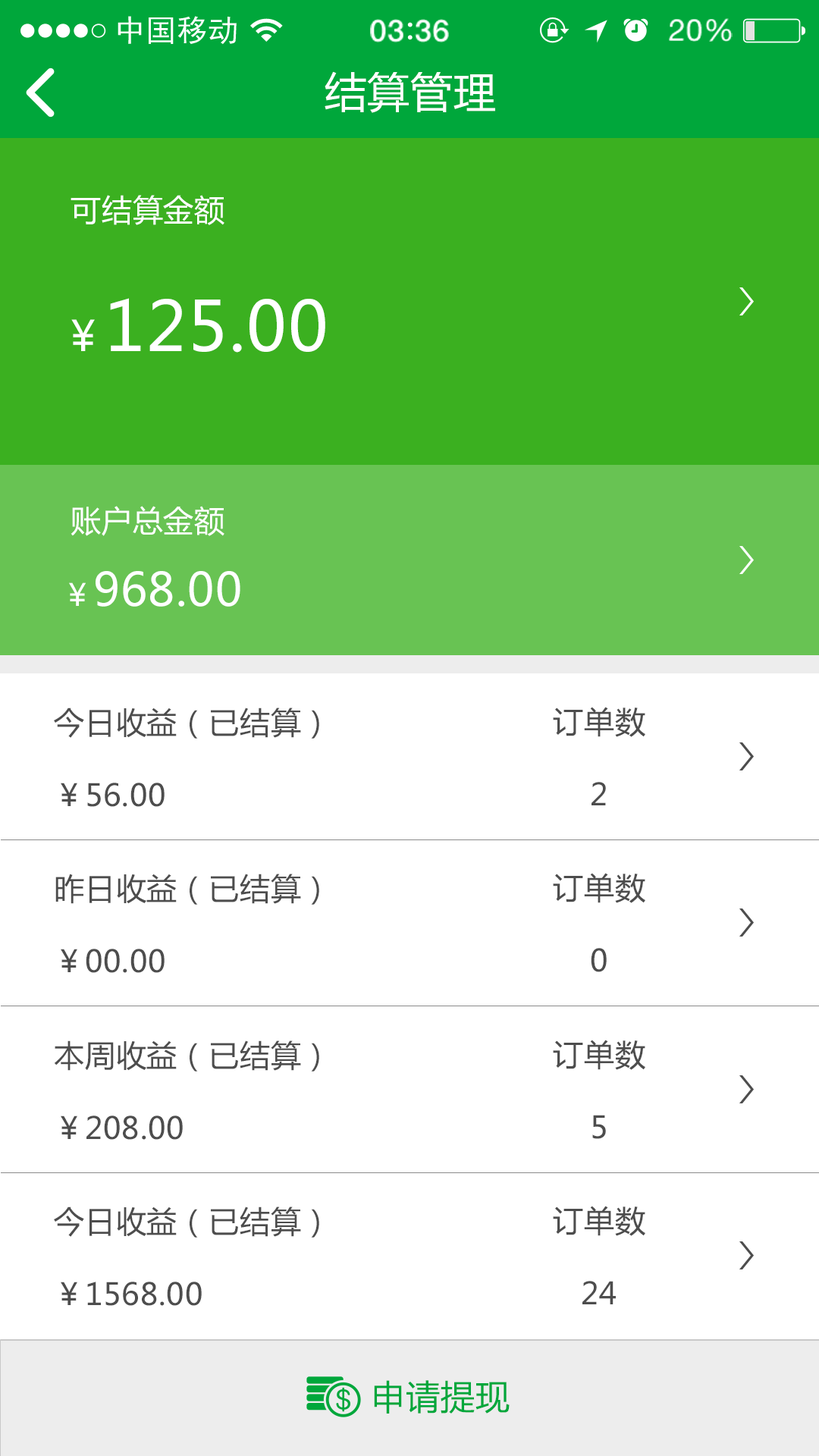
<style>
.page{position:relative;width:819px;height:1456px;background:#ffffff}
.page>*{position:absolute;margin:0}
.t1{font:41.7px "MicrosoftYaHei";letter-spacing:0.02em;color:#ffffff}
.t2{font:30.3px "MicrosoftYaHei";letter-spacing:0.02em;color:#ffffff}
.t3{font:68.2px "MicrosoftYaHei";letter-spacing:0.02em;color:#ffffff}
.t4{font:45.5px "MicrosoftYaHei";letter-spacing:0.02em;color:#ffffff}
.t5{font:30.3px "MicrosoftYaHei";letter-spacing:0.02em;color:#4d4d4d}
.t6{font:34.1px "MicrosoftYaHei";letter-spacing:0.02em;color:#00a73b}
</style>
<div class="page">
<p class="t1" style="left:325px;top:71px;width:170px;height:42px">结算管理</p>
<p class="t2" style="left:71px;top:195px;width:153px;height:30px">可结算金额</p>
<p class="t3" style="left:71px;top:298px;width:254px;height:55px"><span class="t1">￥</span>125.00</p>
<p class="t2" style="left:71px;top:506px;width:153px;height:30px">账户总金额</p>
<p class="t4" style="left:69px;top:571px;width:171px;height:36px"><span class="t2">￥</span>968.00</p>
<p class="t5" style="left:54px;top:708px;width:265px;height:99px">今日收益（已结算）<br><br>￥56.00</p>
<p class="t5" style="left:553px;top:707px;width:92px;height:98px;text-align:center">订单数<br><br>2</p>
<p class="t5" style="left:55px;top:874px;width:264px;height:99px">昨日收益（已结算）<br><br>￥00.00</p>
<p class="t5" style="left:553px;top:873px;width:92px;height:99px;text-align:center">订单数<br><br>0</p>
<p class="t5" style="left:54px;top:1040px;width:265px;height:100px">本周收益（已结算）<br><br>￥208.00</p>
<p class="t5" style="left:553px;top:1040px;width:92px;height:99px;text-align:center">订单数<br><br>5</p>
<p class="t5" style="left:553px;top:1206px;width:92px;height:98px;text-align:center">订单数<br><br>24</p>
<p class="t5" style="left:54px;top:1206px;width:265px;height:100px">今日收益（已结算）<br><br>￥1568.00</p>
<p class="t6" style="left:374px;top:1380px;width:136px;height:34px">申请提现</p>
</div>
